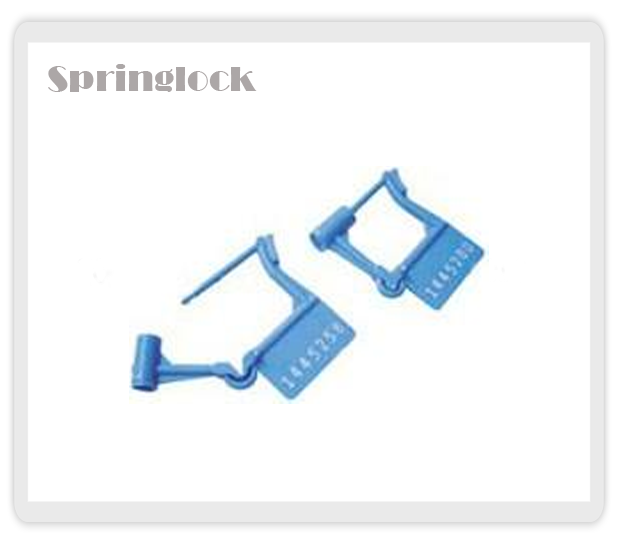
<style>
.page{position:relative;width:618px;height:544px;background:#ffffff}
.page>*{position:absolute;margin:0}
.t1{font:36px "Broadway";color:#aca7a7}
</style>
<div class="page">
<p class="t1" style="left:48px;top:64px;width:209px;height:28px">Springlock</p>
</div>
